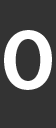
<style>
.page{position:relative;width:56px;height:128px;background:#333333}
.page>*{position:absolute;margin:0}
.t1{font:75px "AdobeGothicStd-Bold";color:#ffffff}
</style>
<div class="page">
<p class="t1" style="left:4px;top:30px;width:48px;height:60px">O</p>
</div>
